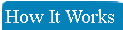
<style>
.page{position:relative;width:123px;height:30px;background:#0481b8}
.page>*{position:absolute;margin:0}
.t1{font:20px "TimesNewRomanPSMT";color:#fafafa}
</style>
<div class="page">
<p class="t1" style="left:5px;top:9px;width:109px;height:14px">How It Works</p>
</div>
